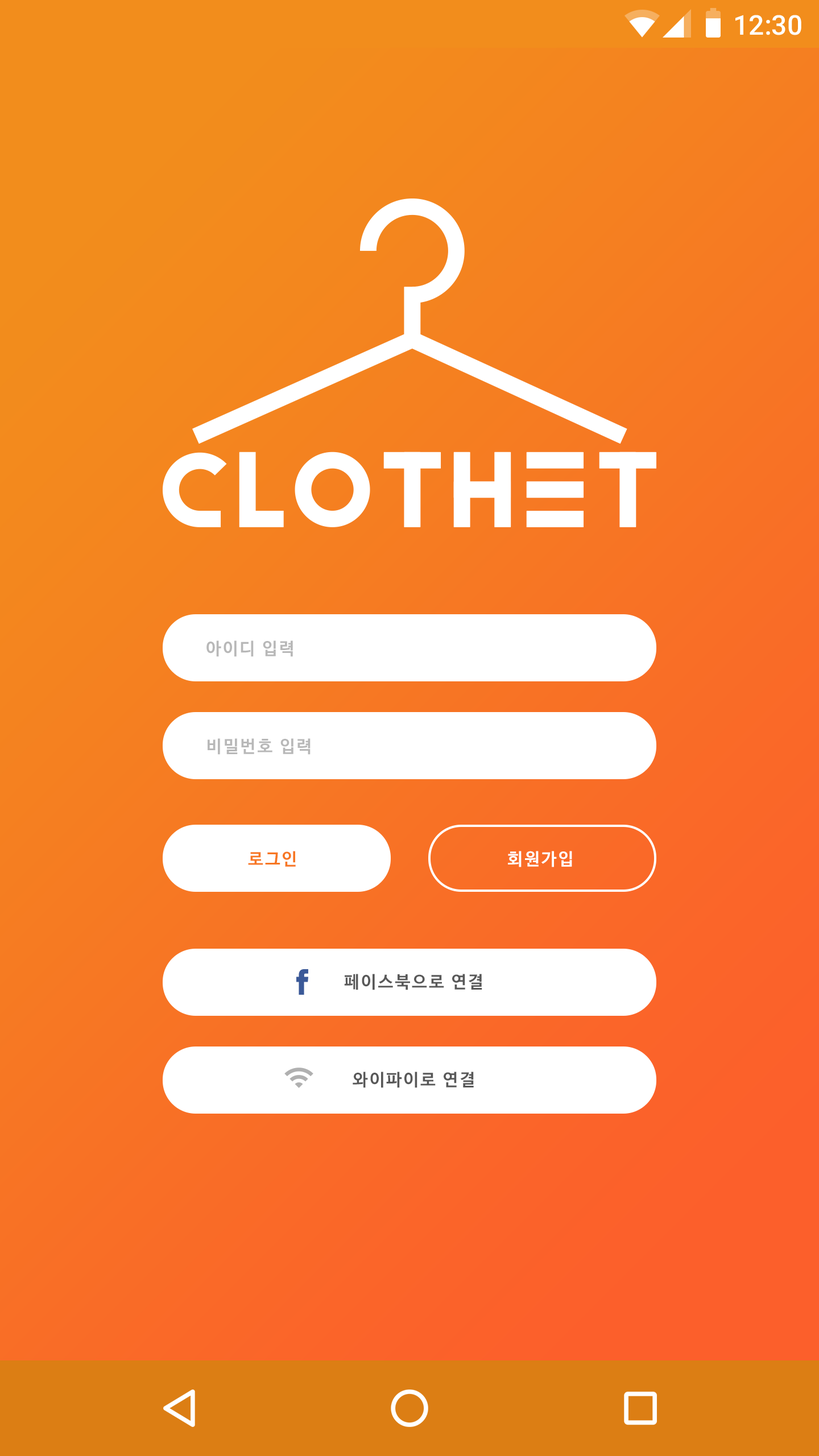
<style>
.page{position:relative;width:819px;height:1456px}
.page>*{position:absolute;margin:0}
.t1{font:27.3px "Roboto-Medium";color:#ffffff}
.t2{font:17.1px "NanumBarunGothicBold";letter-spacing:0.1em;color:#b8b8b8}
.t3{font:17.1px "NanumBarunGothicBold";letter-spacing:0.1em;color:#f77723}
.t4{font:17.1px "NanumBarunGothicBold";letter-spacing:0.1em;color:#ffffff}
.t5{font:17.1px "NanumBarunGothicBold";letter-spacing:0.1em;color:#585858}
</style>
<div class="page">
<p class="t1" style="left:735px;top:15px;width:66px;height:20px">12:30</p>
<p class="t2" style="left:206px;top:640px;width:87px;height:17px">아이디 입력</p>
<p class="t2" style="left:208px;top:738px;width:103px;height:17px">비밀번호 입력</p>
<p class="t3" style="left:248px;top:851px;width:48px;height:16px">로그인</p>
<p class="t4" style="left:508px;top:851px;width:64px;height:16px">회원가입</p>
<p class="t5" style="left:344px;top:974px;width:138px;height:16px">페이스북으로 연결</p>
<p class="t5" style="left:353px;top:1072px;width:121px;height:16px">와이파이로 연결</p>
</div>
